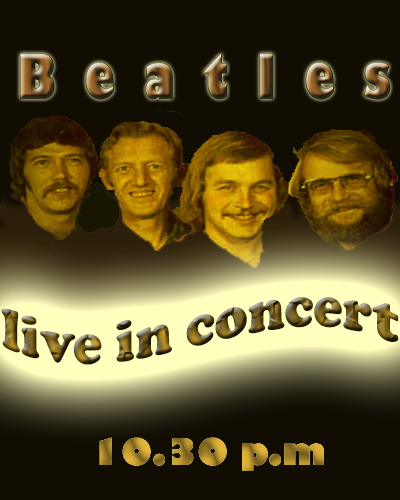
<style>
.page{position:relative;width:400px;height:500px;background:#120d03}
.page>*{position:absolute;margin:0}
.t1{font:60px "GillSans-UltraBold";scale:0.73 1}
.t2{font:60px "CooperBlack";scale:0.91 1}
</style>
<div class="page">
<p class="t1" style="left:20px;top:53px;width:370px;height:47px">B  e  a  t  l  e  s</p>
<p class="t2" style="left:1px;top:297px;width:398px;height:68px">live in concert</p>
</div>
